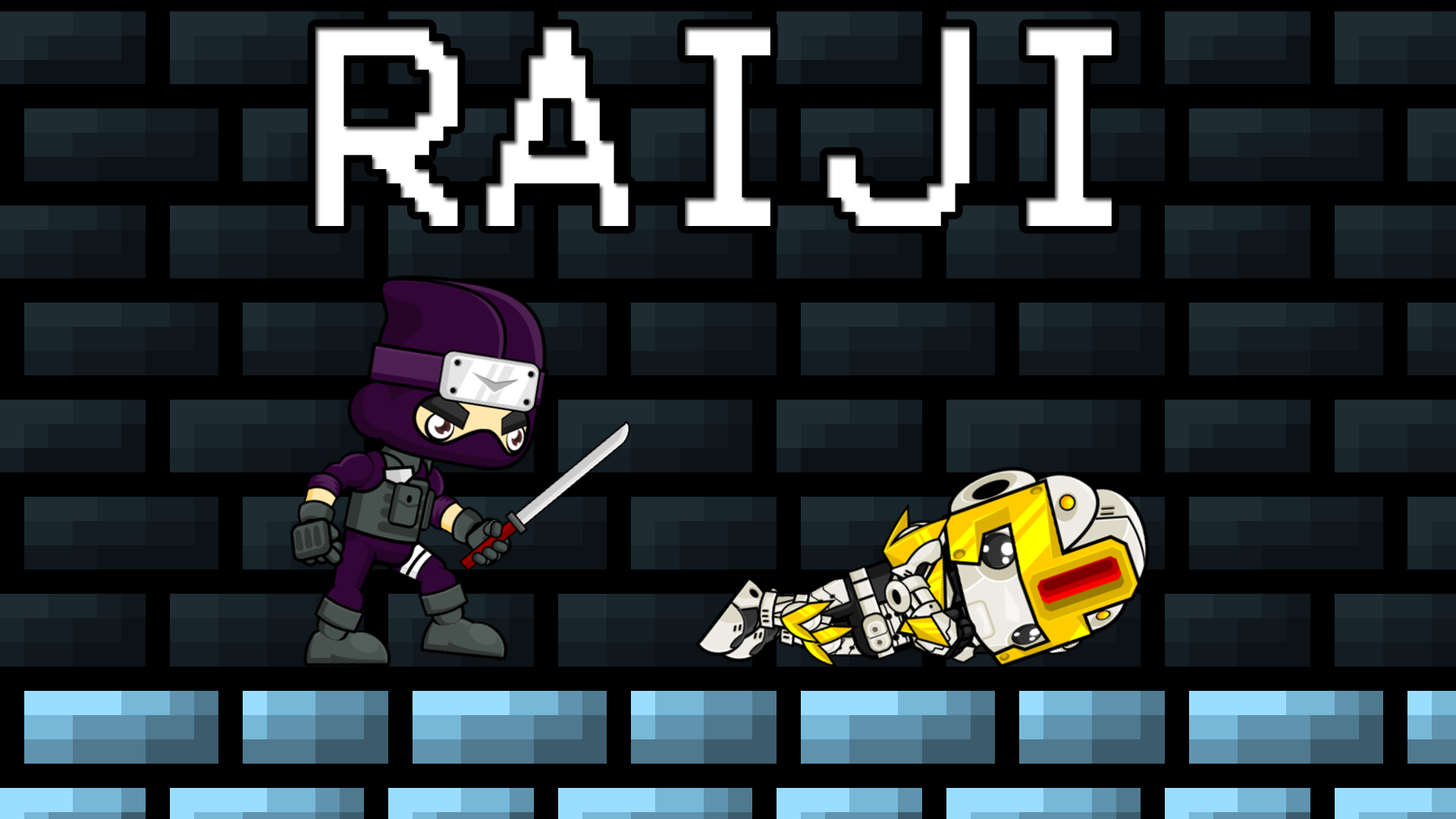
<style>
.page{position:relative;width:1456px;height:819px;background:#000000}
.page>*{position:absolute;margin:0}
.t1{font:227.5px "Terminal";color:#ffffff}
</style>
<div class="page">
<p class="t1" style="left:315px;top:27px;width:797px;height:199px">RAIJI</p>
</div>
